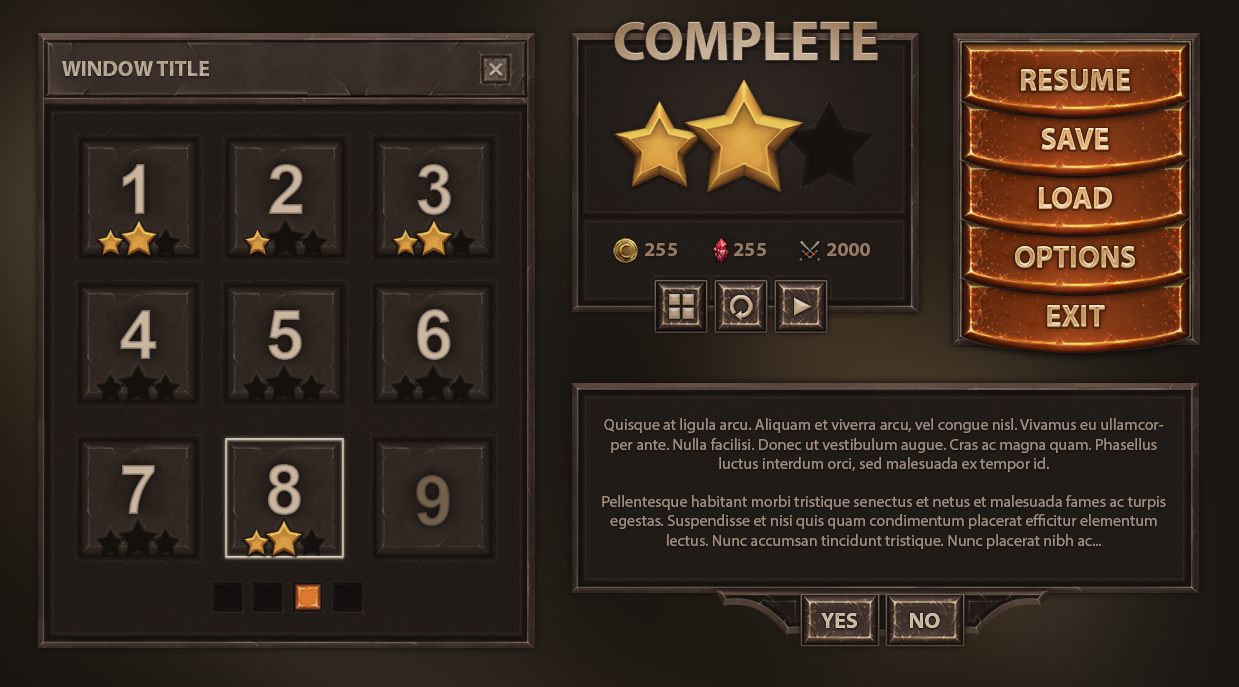
<style>
.page{position:relative;width:1239px;height:687px}
.page>*{position:absolute;margin:0}
.t1{font:55px "MyriadPro-Bold";color:#c2ab91;text-transform:uppercase}
.t2{font:55px "MyriadPro-Bold";text-transform:uppercase}
.t3{font:22px "MyriadPro-Bold";color:#c1ae99;text-transform:uppercase}
.t4{font:30px "MyriadPro-Bold";color:#c99d6a;text-transform:uppercase}
.t5{font:30px "MyriadPro-Bold";text-transform:uppercase}
.t6{font:70px "Arial-BoldMT";color:#cab59f}
.t7{font:70px "Arial-BoldMT"}
.t8{font:30px "MyriadPro-Bold";color:#e5b278;text-transform:uppercase}
.t9{font:20px "MyriadPro-Bold";color:#947b65;text-transform:uppercase}
.t10{font:16px "MyriadPro-Regular";color:#9f8e80}
.t11{font:70px "Arial-BoldMT";color:#73614e}
.t12{font:22px "MyriadPro-Bold";color:#cab294;text-transform:uppercase}
</style>
<div class="page">
<p class="t1" style="left:615px;top:22px;width:263px;height:38px">complete</p>
<p class="t2" style="left:615px;top:22px;width:263px;height:38px">complete</p>
<p class="t3" style="left:62px;top:61px;width:147px;height:15px">Window Title</p>
<p class="t4" style="left:1021px;top:70px;width:109px;height:21px">resume</p>
<p class="t5" style="left:1021px;top:69px;width:109px;height:21px">resume</p>
<p class="t5" style="left:1021px;top:69px;width:109px;height:21px">resume</p>
<p class="t5" style="left:1041px;top:129px;width:68px;height:21px">save</p>
<p class="t5" style="left:1041px;top:128px;width:68px;height:21px">save</p>
<p class="t5" style="left:1041px;top:128px;width:68px;height:21px">save</p>
<p class="t6" style="left:122px;top:164px;width:23px;height:50px">1</p>
<p class="t6" style="left:268px;top:164px;width:35px;height:50px">2</p>
<p class="t7" style="left:417px;top:164px;width:34px;height:51px">3</p>
<p class="t8" style="left:1039px;top:188px;width:73px;height:21px">load</p>
<p class="t5" style="left:1039px;top:187px;width:73px;height:21px">load</p>
<p class="t5" style="left:1039px;top:187px;width:73px;height:21px">load</p>
<p class="t9" style="left:645px;top:243px;width:32px;height:13px">255</p>
<p class="t9" style="left:734px;top:243px;width:32px;height:13px">255</p>
<p class="t9" style="left:827px;top:243px;width:43px;height:13px">2000</p>
<p class="t5" style="left:1015px;top:246px;width:120px;height:21px">options</p>
<p class="t5" style="left:1015px;top:246px;width:120px;height:21px">options</p>
<p class="t4" style="left:1015px;top:247px;width:120px;height:21px">options</p>
<p class="t5" style="left:1047px;top:305px;width:58px;height:21px">Exit</p>
<p class="t5" style="left:1047px;top:305px;width:58px;height:21px">Exit</p>
<p class="t7" style="left:120px;top:310px;width:37px;height:49px">4</p>
<p class="t6" style="left:268px;top:310px;width:34px;height:50px">5</p>
<p class="t6" style="left:417px;top:309px;width:34px;height:51px">6</p>
<p class="t4" style="left:1047px;top:306px;width:58px;height:21px">Exit</p>
<p class="t10" style="left:602px;top:418px;width:564px;height:131px;text-align:center">Quisque at ligula arcu. Aliquam et viverra arcu, vel congue nisl. Vivamus eu ullamcorper ante. Nulla facilisi. Donec ut vestibulum augue. Cras ac magna quam. Phasellus luctus interdum orci, sed malesuada ex tempor id. <br><br>Pellentesque habitant morbi tristique senectus et netus et malesuada fames ac turpis egestas. Suspendisse et nisi quis quam condimentum placerat efficitur elementum lectus. Nunc accumsan tincidunt tristique. Nunc placerat nibh ac...</p>
<p class="t7" style="left:122px;top:465px;width:33px;height:49px">7</p>
<p class="t6" style="left:267px;top:464px;width:34px;height:51px">8</p>
<p class="t11" style="left:416px;top:475px;width:34px;height:51px">9</p>
<p class="t12" style="left:821px;top:613px;width:36px;height:15px">yes</p>
<p class="t12" style="left:910px;top:613px;width:30px;height:15px">No</p>
</div>
